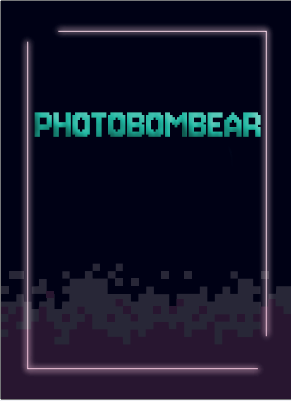
<style>
.page{position:relative;width:291px;height:401px;background:#000115}
.page>*{position:absolute;margin:0}
.t1{font:45px "Jersey10-Regular"}
</style>
<div class="page">
<p class="t1" style="left:34px;top:112px;width:227px;height:25px">PHOTOBOMBEAR</p>
</div>
